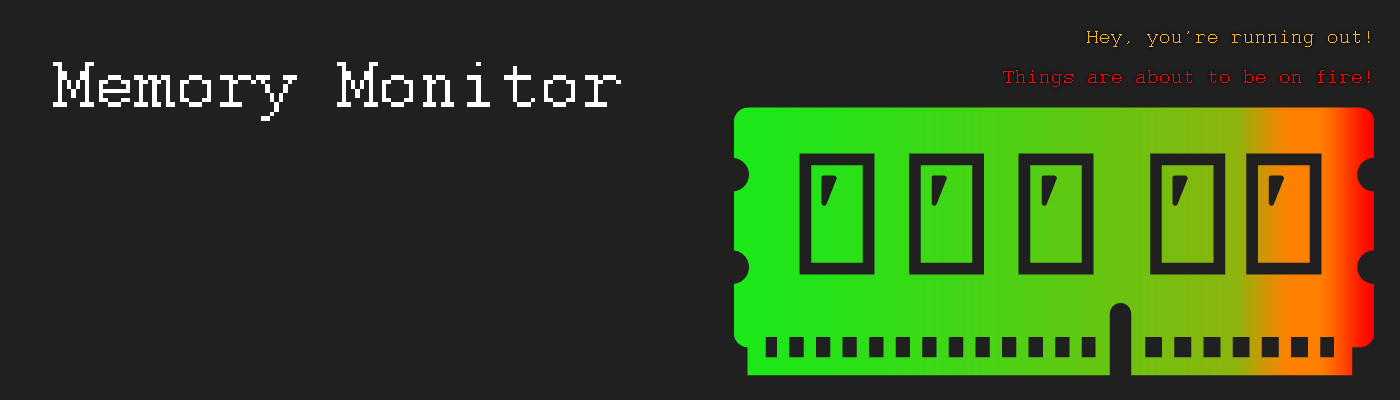
<style>
.page{position:relative;width:1400px;height:400px;background:#202020}
.page>*{position:absolute;margin:0}
.t1{font:24px "Courier";color:#ffba00}
.t2{font:72px "Courier";color:#ffffff}
.t3{font:24px "Courier";color:#ff0000}
</style>
<div class="page">
<p class="t1" style="left:1087px;top:30px;width:282px;height:17px">Hey, you’re running out!</p>
<p class="t2" style="left:53px;top:62px;width:568px;height:59px">Memory Monitor</p>
<p class="t3" style="left:1003px;top:70px;width:366px;height:17px">Things are about to be on fire!</p>
</div>
